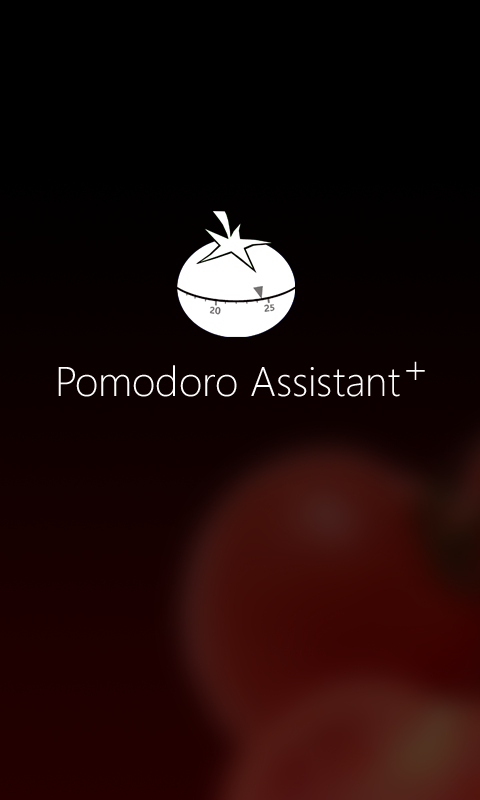
<style>
.page{position:relative;width:480px;height:800px;background:#000000}
.page>*{position:absolute;margin:0}
.t1{font:41.5px "SegoeWP-Light";color:#ffffff}
</style>
<div class="page">
<p class="t1" style="left:58px;top:365px;width:342px;height:32px">Pomodoro Assistant</p>
<p class="t1" style="left:406px;top:361px;width:19px;height:19px">+</p>
</div>
